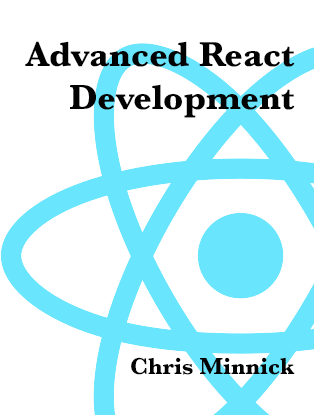
<style>
.page{position:relative;width:314px;height:415px;background:#ffffff}
.page>*{position:absolute;margin:0}
.t1{font:36px "Baskerville-Bold";color:#020202}
.t2{font:24px "Baskerville-Bold";color:#020202}
</style>
<div class="page">
<p class="t1" style="left:25px;top:41px;width:270px;height:77px;text-align:right">Advanced React Development</p>
<p class="t2" style="left:131px;top:357px;width:164px;height:18px">Chris Minnick</p>
</div>
